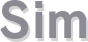
<style>
.page{position:relative;width:88px;height:42px;background:#ffffff}
.page>*{position:absolute;margin:0}
.t1{font:48px "RodinPro-B";color:#8c8b93}
</style>
<div class="page">
<p class="t1" style="left:0px;top:0px;width:86px;height:39px">Sim</p>
</div>
